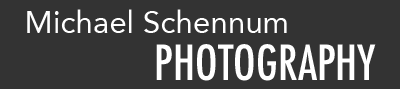
<style>
.page{position:relative;width:400px;height:89px;background:#333333}
.page>*{position:absolute;margin:0}
.t1{font:31.3px "Avenir-Roman";color:#ffffff}
.t2{font:46.9px "Futura-CondensedMedium";color:#ffffff}
</style>
<div class="page">
<p class="t1" style="left:27px;top:9px;width:260px;height:24px">Michael Schennum</p>
<p class="t2" style="left:156px;top:44px;width:220px;height:37px">PHOTOGRAPHY</p>
</div>
